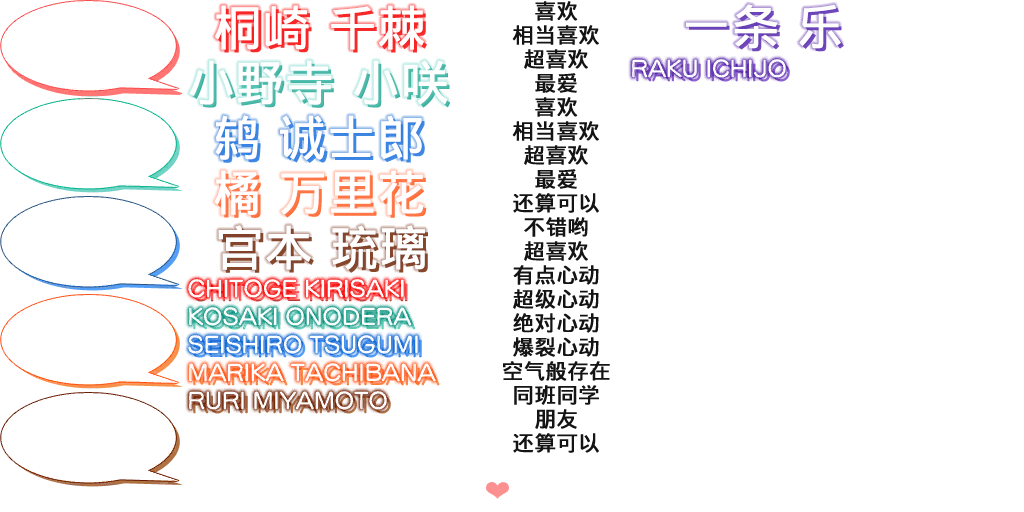
<style>
.page{position:relative;width:1024px;height:512px;background:#ffffff}
.page>*{position:absolute;margin:0}
.t1{font:48px "WenQuanYiMicroHeiMono";color:#ffffff;font-weight:bold}
.t2{font:21.3px/24px "WenQuanYiMicroHeiMono";color:#131413;font-weight:bold}
.t3{font:48px "WenQuanYiMicroHeiMono";font-weight:bold}
</style>
<div class="page">
<p class="t1" style="left:215px;top:5px;width:94px;height:45px">桐崎</p>
<p class="t1" style="left:331px;top:5px;width:93px;height:45px">千棘</p>
<p class="t2" style="left:503px;top:1px;width:107px;height:452px;text-align:center">喜欢<br>相当喜欢<br>超喜欢<br>最爱<br>喜欢<br>相当喜欢<br>超喜欢<br>最爱<br>还算可以<br>不错哟<br>超喜欢<br>有点心动<br>超级心动<br>绝对心动<br>爆裂心动<br>空气般存在<br>同班同学<br>朋友<br>还算可以</p>
<p class="t1" style="left:799px;top:4px;width:42px;height:45px">乐</p>
<p class="t3" style="left:218px;top:8px;width:94px;height:45px">桐崎</p>
<p class="t3" style="left:334px;top:8px;width:93px;height:45px">千棘</p>
<p class="t3" style="left:689px;top:7px;width:92px;height:45px">一条</p>
<p class="t3" style="left:802px;top:7px;width:42px;height:45px">乐</p>
<p class="t1" style="left:189px;top:60px;width:143px;height:45px">小野寺</p>
<p class="t3" style="left:192px;top:63px;width:143px;height:45px">小野寺</p>
<p class="t1" style="left:354px;top:60px;width:94px;height:45px">小咲</p>
<p class="t3" style="left:357px;top:63px;width:94px;height:45px">小咲</p>
<p class="t1" style="left:215px;top:115px;width:43px;height:45px">鸫</p>
<p class="t3" style="left:218px;top:118px;width:43px;height:45px">鸫</p>
<p class="t1" style="left:280px;top:115px;width:142px;height:45px">诚士郎</p>
<p class="t3" style="left:283px;top:118px;width:142px;height:45px">诚士郎</p>
<p class="t1" style="left:214px;top:170px;width:44px;height:45px">橘</p>
<p class="t3" style="left:217px;top:173px;width:44px;height:45px">橘</p>
<p class="t1" style="left:281px;top:170px;width:143px;height:45px">万里花</p>
<p class="t3" style="left:284px;top:173px;width:143px;height:45px">万里花</p>
<p class="t1" style="left:218px;top:225px;width:93px;height:45px">宫本</p>
<p class="t3" style="left:221px;top:228px;width:93px;height:45px">宫本</p>
<p class="t1" style="left:332px;top:225px;width:93px;height:45px">琉璃</p>
<p class="t3" style="left:335px;top:228px;width:93px;height:45px">琉璃</p>
</div>
